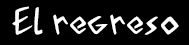
<style>
.page{position:relative;width:189px;height:45px;background:#000000}
.page>*{position:absolute;margin:0}
.t1{font:34.9px "AcadianRunes-Regular";color:#ffffff}
</style>
<div class="page">
<p class="t1" style="left:12px;top:6px;width:167px;height:29px">El regreso</p>
</div>
